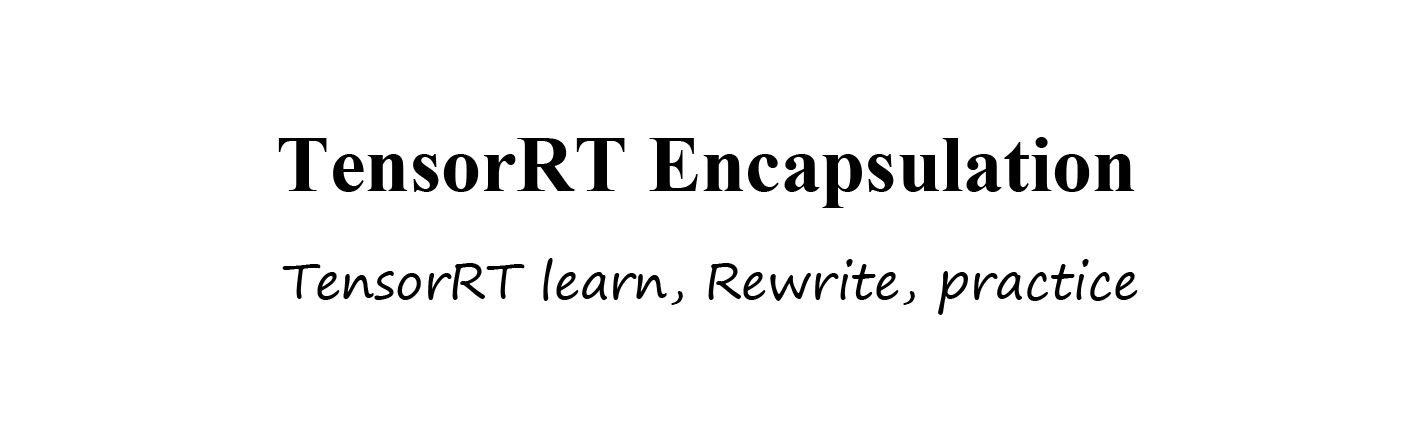
<style>
.page{position:relative;width:1417px;height:425px;background:#ffffff}
.page>*{position:absolute;margin:0}
.t1{font:80px "TimesNewRomanPS-BoldMT";color:#000000}
.t2{font:50px "SegoePrint";color:#000000}
</style>
<div class="page">
<p class="t1" style="left:278px;top:137px;width:857px;height:71px">TensorRT Encapsulation</p>
<p class="t2" style="left:282px;top:258px;width:856px;height:57px">TensorRT learn, Rewrite, practice</p>
</div>
